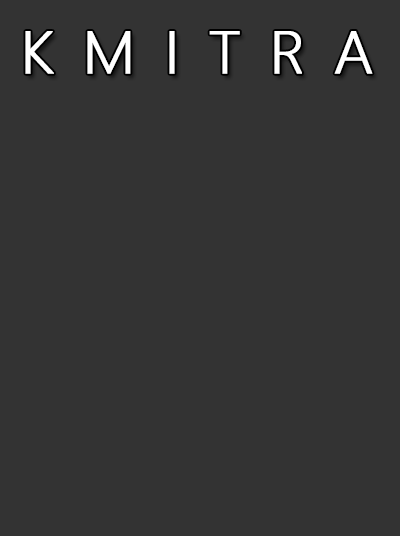
<style>
.page{position:relative;width:400px;height:536px;background:#333333}
.page>*{position:absolute;margin:0}
.t1{font:60px "SegoeWP-Light";letter-spacing:0.445em;color:#ffffff;text-transform:uppercase;font-weight:bold;scale:1.04 1}
.t2{font:60px "SegoeWP-Light";color:#ffffff;text-transform:uppercase;font-weight:bold;scale:1.04 1}
</style>
<div class="page">
<p class="t1" style="left:25px;top:31px;width:348px;height:43px">KMITR<span class="t2">A</span></p>
</div>
